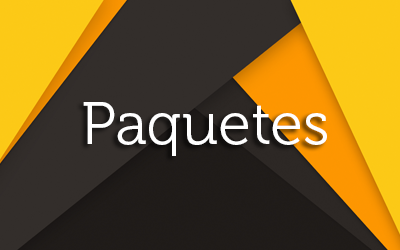
<style>
.page{position:relative;width:400px;height:250px;background:#332e2b}
.page>*{position:absolute;margin:0}
.t1{font:60px "Museo-300";color:#fefefe}
</style>
<div class="page">
<p class="t1" style="left:83px;top:102px;width:244px;height:54px">Paquetes</p>
</div>
